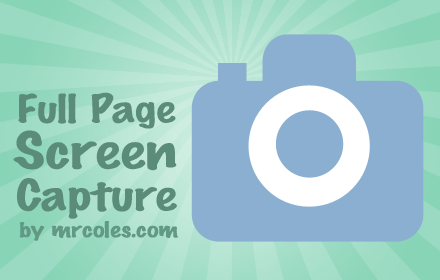
<style>
.page{position:relative;width:440px;height:280px;background:#8bafd0}
.page>*{position:absolute;margin:0}
.t1{font:35px "MarkerFelt-Thin";color:#5a8c79;scale:1.43 1}
.t2{font:45.5px "MarkerFelt-Thin";color:#5a8c79;scale:1.43 1}
.t3{font:39.2px "MarkerFelt-Thin";color:#5a8c79;scale:1.43 1}
.t4{font:19.6px "MarkerFelt-Thin";color:#629984;scale:1.43 1}
</style>
<div class="page">
<p class="t1" style="left:18px;top:92px;width:158px;height:37px">Full Page</p>
<p class="t2" style="left:13px;top:130px;width:164px;height:41px">Screen</p>
<p class="t3" style="left:17px;top:178px;width:160px;height:41px">Capture</p>
<p class="t4" style="left:19px;top:221px;width:159px;height:20px">by mrcoles.com</p>
</div>
